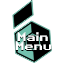
<style>
.page{position:relative;width:64px;height:64px;background:#ffffff}
.page>*{position:absolute;margin:0}
.t1{font:12px "RetroGaming";color:#ffffff}
.t2{font:12px "RetroGaming"}
</style>
<div class="page">
<p class="t1" style="left:15px;top:41px;width:37px;height:9px">Menu</p>
<p class="t2" style="left:17px;top:33px;width:31px;height:9px">Main</p>
<p class="t1" style="left:17px;top:32px;width:31px;height:9px">Main</p>
<p class="t2" style="left:15px;top:42px;width:37px;height:9px">Menu</p>
</div>
